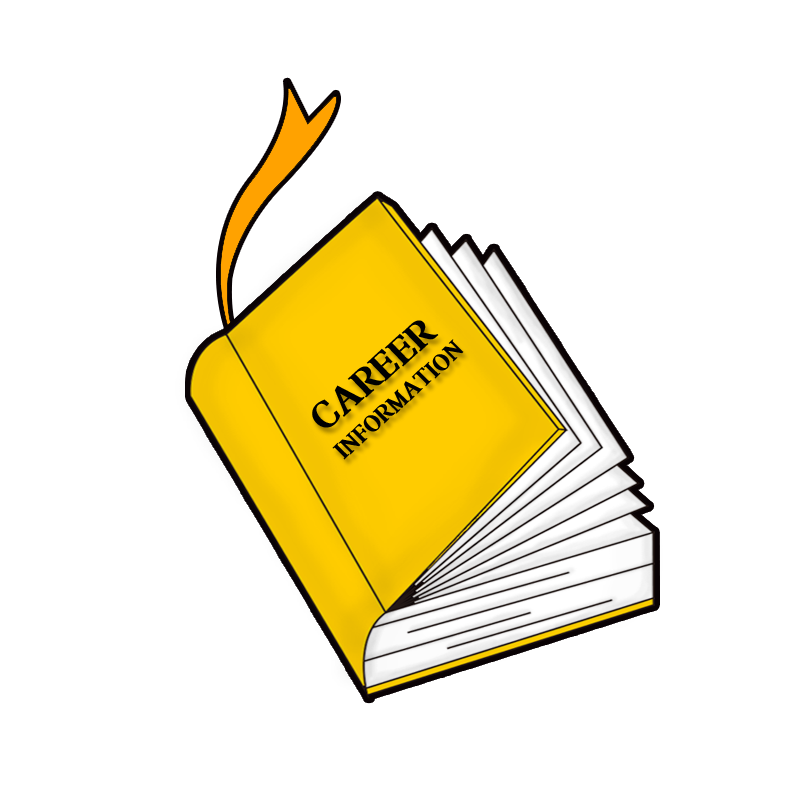
<style>
.page{position:relative;width:800px;height:800px;background:#ffffff}
.page>*{position:absolute;margin:0}
.t1{font:33px "KoreanJMDB-R";color:#000000}
.t2{font:20.8px "KoreanJMDB-R";color:#000000}
</style>
<div class="page">
<p class="t1" style="left:312px;top:320px;width:127px;height:108px;rotate:-41deg">CAREER</p>
<p class="t2" style="left:332px;top:339px;width:132px;height:121px;rotate:-42deg">INFORMATION</p>
</div>
